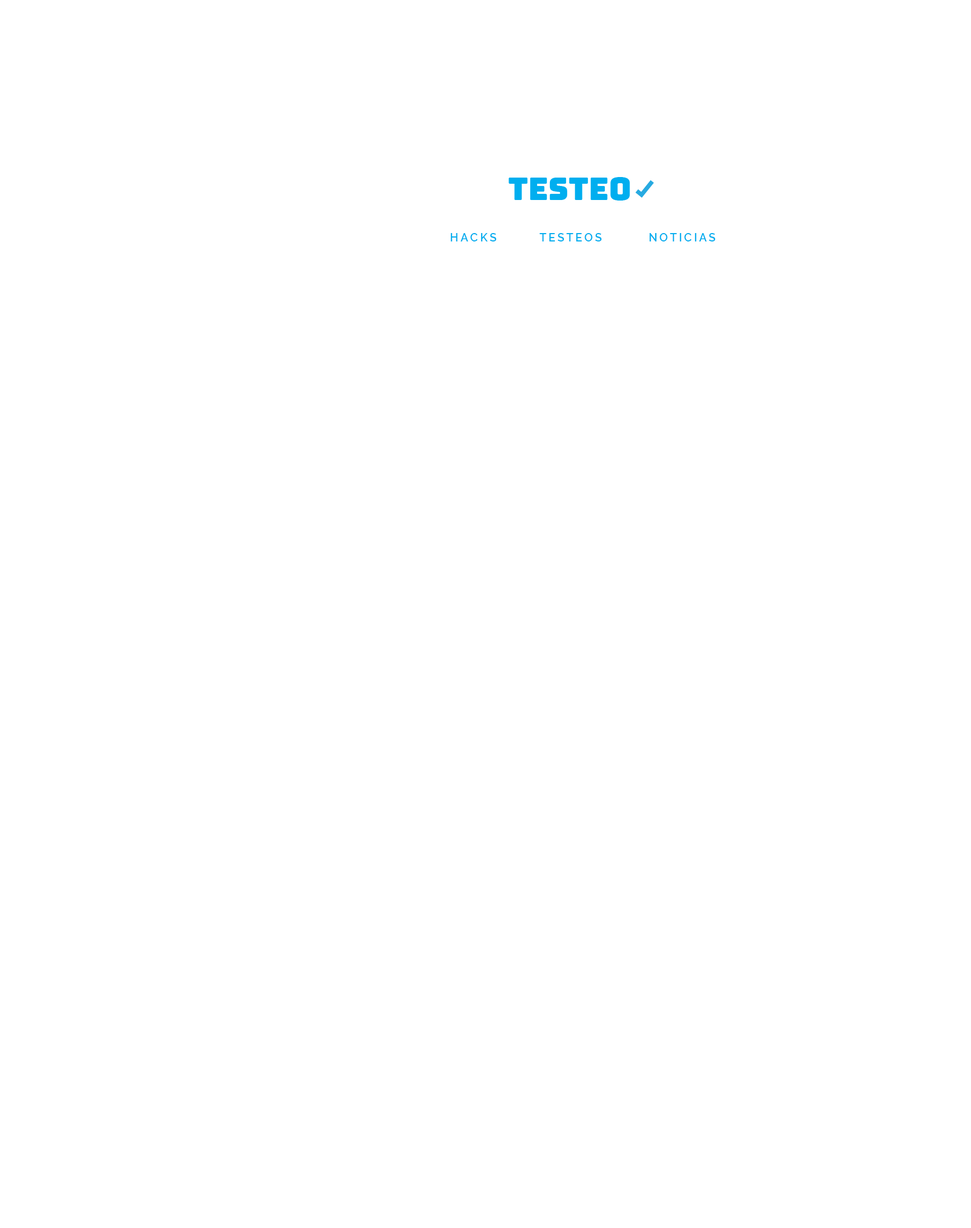
<style>
.page{position:relative;width:971px;height:1228px;background:#ffffff}
.page>*{position:absolute;margin:0}
.t1{font:11.2px "Raleway-SemiBold";letter-spacing:0.2em;color:#00aeef;text-transform:uppercase}
</style>
<div class="page">
<p class="t1" style="left:451px;top:233px;width:46px;height:8px">hacks</p>
<p class="t1" style="left:539px;top:233px;width:63px;height:8px">TESTEOS</p>
<p class="t1" style="left:650px;top:233px;width:66px;height:8px">noticias</p>
</div>
